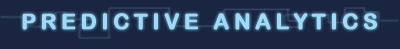
<style>
.page{position:relative;width:400px;height:49px;background:#1a2641}
.page>*{position:absolute;margin:0}
.t1{font:21.6px "ArialRoundedMTBold";letter-spacing:0.2em;color:#a0d9f9;font-weight:bold}
</style>
<div class="page">
<p class="t1" style="left:22px;top:13px;width:355px;height:17px">PREDICTIVE ANALYTICS</p>
</div>
